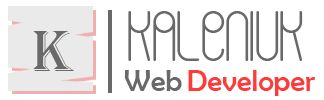
<style>
.page{position:relative;width:324px;height:100px;background:#ffffff}
.page>*{position:absolute;margin:0}
.t1{font:60px "HappySpratCyrillic";color:#6a696a}
.t2{font:60px "Algerian";color:#6a696a}
.t3{font:30px "BerlinSansFB-Reg";color:#6a696a}
.t4{font:30px "BerlinSansFB-Reg";color:#ff3a3a}
</style>
<div class="page">
<p class="t1" style="left:128px;top:11px;width:175px;height:50px">KALENIUK</p>
<p class="t2" style="left:33px;top:31px;width:41px;height:40px">K</p>
<p class="t3" style="left:124px;top:70px;width:58px;height:21px">Web</p>
<p class="t4" style="left:188px;top:70px;width:127px;height:26px">Developer</p>
</div>
